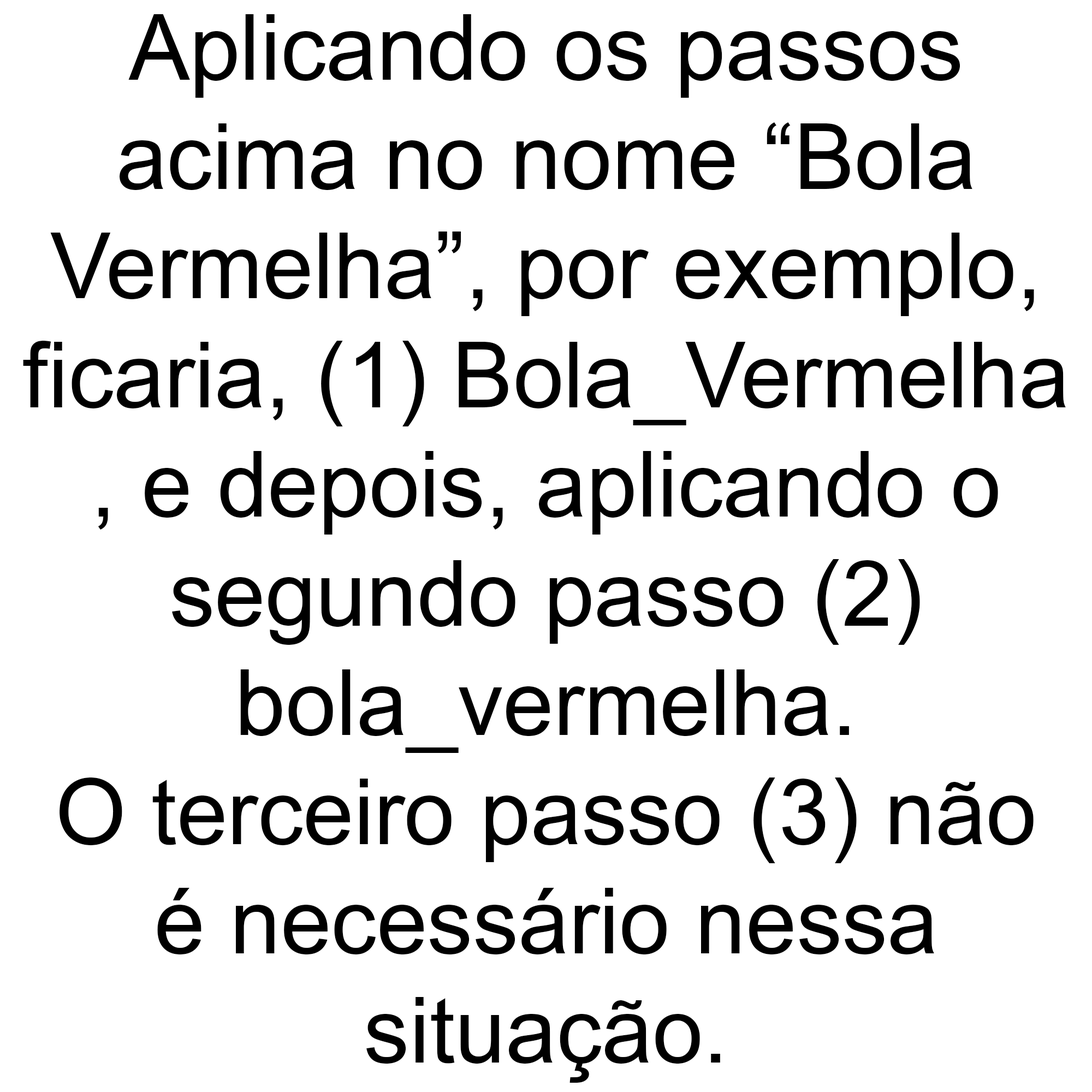
<style>
.page{position:relative;width:1092px;height:1092px;background:#ffffff}
.page>*{position:absolute;margin:0}
.t1{font:91px "ArialMT";color:#000000}
</style>
<div class="page">
<p class="t1" style="left:23px;top:14px;width:1043px;height:1069px;text-align:center">Aplicando os passos<br>acima no nome “Bola<br>Vermelha”, por exemplo,<br>ficaria, (1) Bola_Vermelha<br>, e depois, aplicando o<br>segundo passo (2)<br>bola_vermelha.<br>O terceiro passo (3) não<br>é necessário nessa<br>situação.</p>
</div>
